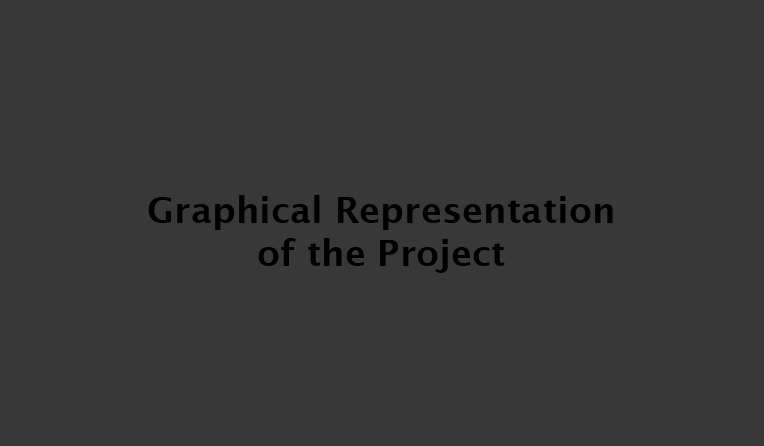
<style>
.page{position:relative;width:764px;height:446px;background:#383838}
.page>*{position:absolute;margin:0}
.t1{font:36px "LucidaSans-Demi";color:#000000}
</style>
<div class="page">
<p class="t1" style="left:148px;top:195px;width:465px;height:78px;text-align:center">Graphical Representation of the Project</p>
</div>
